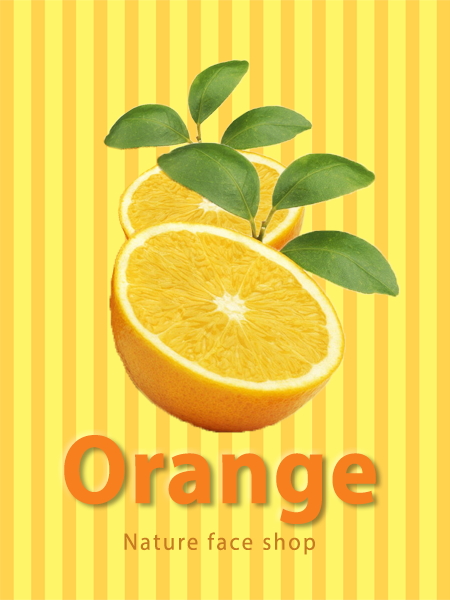
<style>
.page{position:relative;width:450px;height:600px;background:#fff568}
.page>*{position:absolute;margin:0}
.t1{font:99.4px "MyriadPro-Bold";letter-spacing:0.02em;color:#f77f1d;scale:0.94 1}
.t2{font:99.4px "MyriadPro-Bold";letter-spacing:0.02em;color:#f77f1d;text-transform:uppercase;scale:0.94 1}
.t3{font:24px "MyriadPro-Regular";letter-spacing:0.1em;color:#c77b21;scale:0.94 1}
</style>
<div class="page">
<p class="t1" style="left:64px;top:435px;width:312px;height:89px"><span class="t2">O</span>range</p>
<p class="t3" style="left:124px;top:532px;width:191px;height:23px">Nature face shop</p>
</div>
